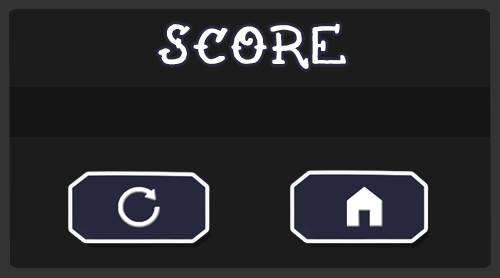
<style>
.page{position:relative;width:500px;height:278px;background:#1c1c1c}
.page>*{position:absolute;margin:0}
.t1{font:48px "Rats-Get-Fat";color:#ffffff}
</style>
<div class="page">
<p class="t1" style="left:158px;top:23px;width:188px;height:46px">SCORE</p>
</div>
